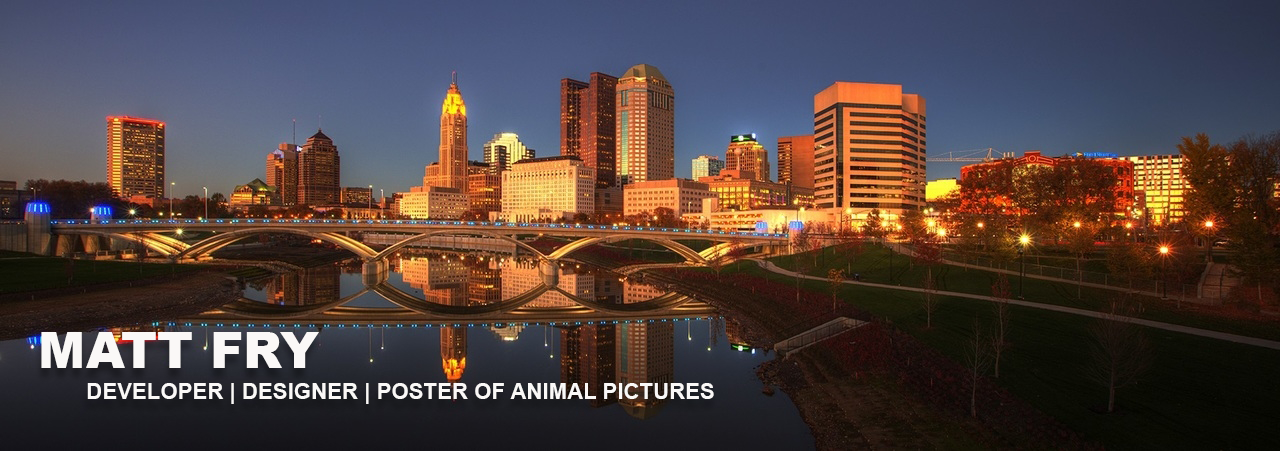
<style>
.page{position:relative;width:1280px;height:451px}
.page>*{position:absolute;margin:0}
.t1{font:50px "Arial-Black";color:#faf8f7}
.t2{font:22.2px "Arial-BoldMT";color:#faf8f7}
</style>
<div class="page">
<p class="t1" style="left:41px;top:332px;width:278px;height:36px">MATT FRY</p>
<p class="t2" style="left:87px;top:383px;width:627px;height:21px">DEVELOPER | DESIGNER | POSTER OF ANIMAL PICTURES</p>
</div>
